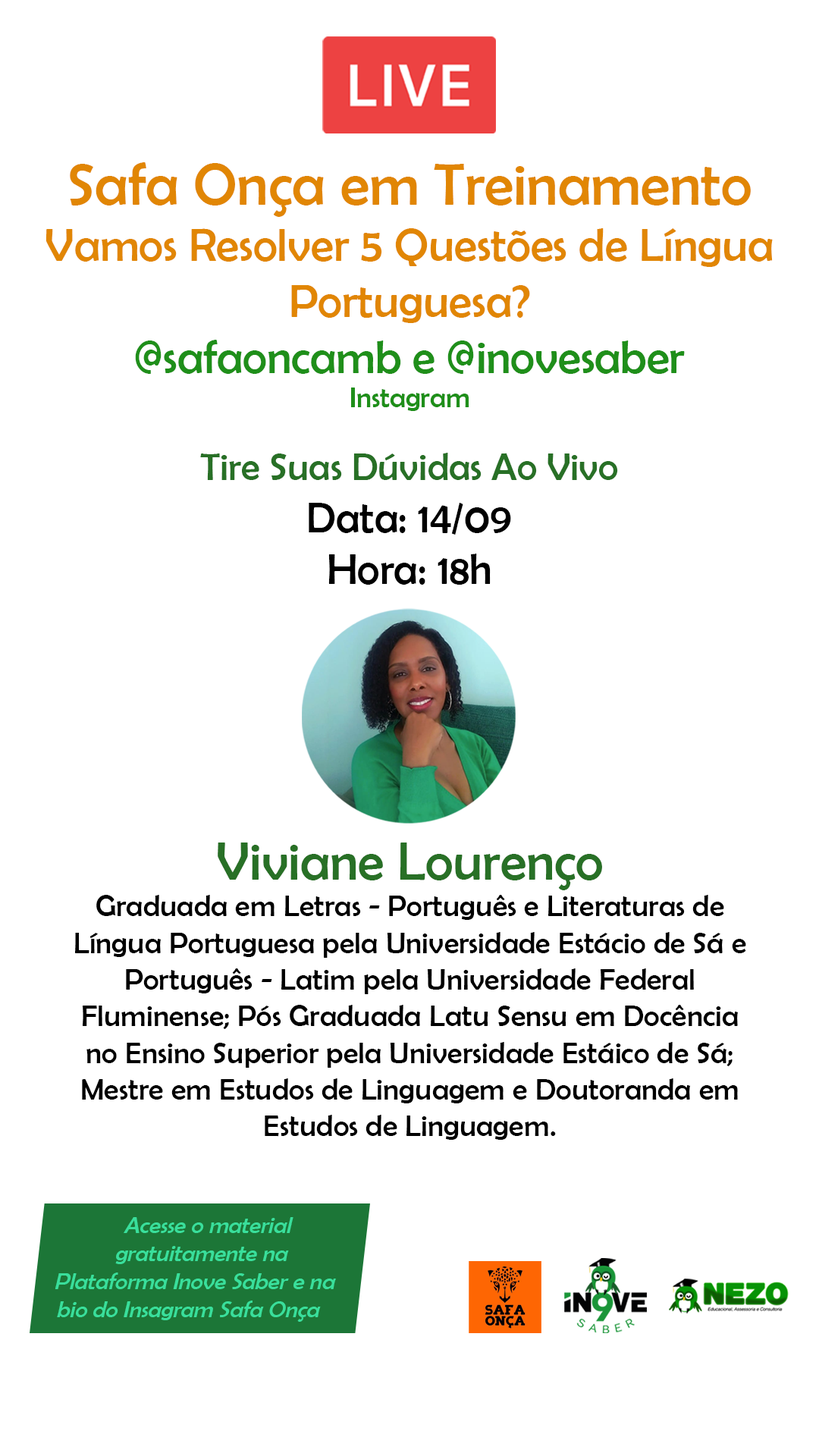
<style>
.page{position:relative;width:819px;height:1456px;background:#ffffff}
.page>*{position:absolute;margin:0}
.t1{font:46.7px "BerlinSansFB-Reg";color:#e18604}
.t2{font:59.7px "BerlinSansFB-Reg";color:#e18604}
.t3{font:46.7px "BerlinSansFB-Reg";color:#1f8f1a}
.t4{font:28.6px "BerlinSansFB-Reg";color:#1f8f1a}
.t5{font:38.7px "BerlinSansFB-Reg";color:#287026}
.t6{font:43.3px "BerlinSansFB-Reg";color:#000000}
.t7{font:30.6px "BerlinSansFB-Reg";color:#000000}
.t8{font:53.7px/101.1px "BerlinSansFB-Reg";color:#287026}
.t9{font:23.9px "BerlinSansFB-Reg";color:#39df9b}
</style>
<div class="page">
<p class="t1" style="left:45px;top:162px;width:728px;height:249px;text-align:center"><span class="t2">Safa Onça em Treinamento<br></span>Vamos Resolver 5 Questões de Língua Portuguesa?<br><span class="t3">@safaoncamb e @inovesaber<br></span><span class="t4">Instagram</span></p>
<p class="t5" style="left:200px;top:453px;width:418px;height:132px;text-align:center">Tire Suas Dúvidas Ao Vivo<br><span class="t6">Data: 14/09<br>Hora: 18h</span></p>
<p class="t7" style="left:75px;top:842px;width:671px;height:298px;text-align:center"><span class="t8">Viviane Lourenço<br></span>Graduada em Letras - Português e Literaturas de Língua Portuguesa pela Universidade Estácio de Sá e Português - Latim pela Universidade Federal Fluminense; Pós Graduada Latu Sensu em Docência no Ensino Superior pela Universidade Estáico de Sá; Mestre em Estudos de Linguagem e Doutoranda em Estudos de Linguagem.</p>
<p class="t9" style="left:55px;top:1217px;width:281px;height:105px;text-align:center">Acesse o material gratuitamente na Plataforma Inove Saber e na bio do Insagram Safa Onça</p>
</div>
